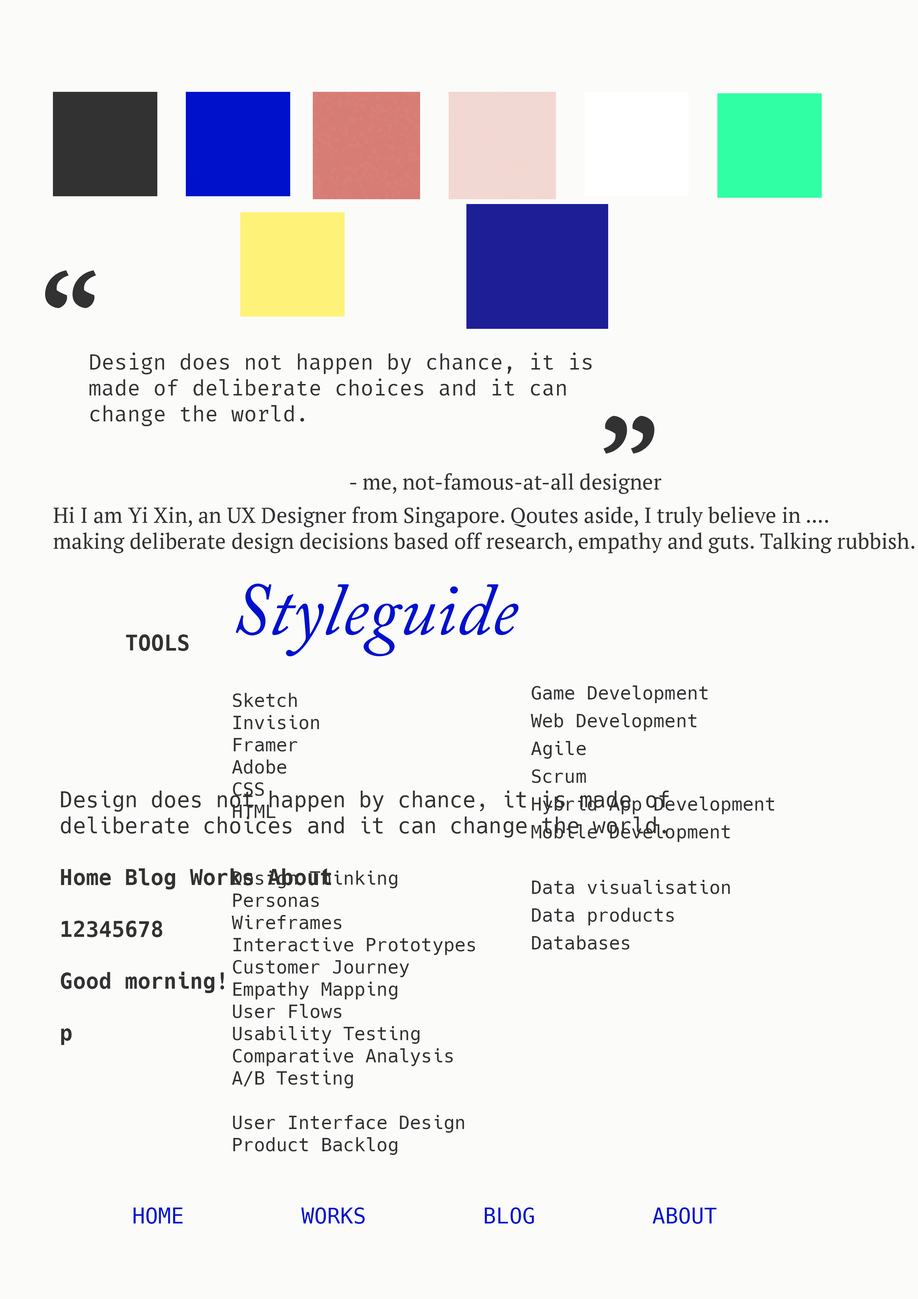
<style>
.page{position:relative;width:918px;height:1299px;background:#fbfbfa}
.page>*{position:absolute;margin:0}
.t1{font:151.3px "PTSerif-Regular";color:#323232}
.t2{font:21.6px "FiraMono-Regular";color:#323232}
.t3{font:21.6px "PTSerif-Regular";color:#323232}
.t4{font:74px "ACaslonPro-Italic";color:#0011cd}
.t5{font:21.6px "Hack-Bold";color:#323232}
.t6{font:18.5px/27.8px "Hack-Regular";color:#323232}
.t7{font:18.5px "Hack-Regular";color:#323232}
.t8{font:21.6px "Hack-Regular";color:#323232}
.t9{font:21.6px "Hack-Regular";color:#0011cd}
</style>
<div class="page">
<p class="t1" style="left:45px;top:270px;width:51px;height:38px">“</p>
<p class="t2" style="left:90px;top:352px;width:502px;height:74px">Design does not happen by chance, it is <br>made of deliberate choices and it can <br>change the world.</p>
<p class="t1" style="left:603px;top:416px;width:52px;height:38px;rotate:180deg">“</p>
<p class="t3" style="left:350px;top:473px;width:312px;height:21px">- me, not-famous-at-all designer</p>
<p class="t3" style="left:53px;top:506px;width:862px;height:47px">Hi I am Yi Xin, an UX Designer from Singapore. Qoutes aside, I truly believe in ....<br>making deliberate design decisions based off research, empathy and guts. Talking rubbish.</p>
<p class="t4" style="left:236px;top:583px;width:283px;height:73px">Styleguide</p>
<p class="t5" style="left:126px;top:634px;width:63px;height:17px">TOOLS</p>
<p class="t6" style="left:531px;top:685px;width:244px;height:265px">Game Development<br>Web Development<br>Agile<br>Scrum<br>Hybrid App Development<br>Mobile Development<br><br>Data visualisation<br>Data products<br>Databases</p>
<p class="t7" style="left:232px;top:693px;width:243px;height:462px">Sketch<br>Invision<br>Framer<br>Adobe <br>CSS<br>HTML<br><br><br>Design Thinking<br>Personas<br>Wireframes<br>Interactive Prototypes<br>Customer Journey<br>Empathy Mapping<br>User Flows<br>Usability Testing<br>Comparative Analysis<br>A/B Testing<br><br>User Interface Design<br>Product Backlog</p>
<p class="t8" style="left:61px;top:790px;width:608px;height:255px">Design does not happen by chance, it is made of <br>deliberate choices and it can change the world.<br><span class="t5"><br>Home Blog Works About<br><br>12345678<br><br>Good morning!<br><br>p</span></p>
<p class="t9" style="left:133px;top:1207px;width:584px;height:17px">HOME         WORKS         BLOG         ABOUT</p>
</div>
